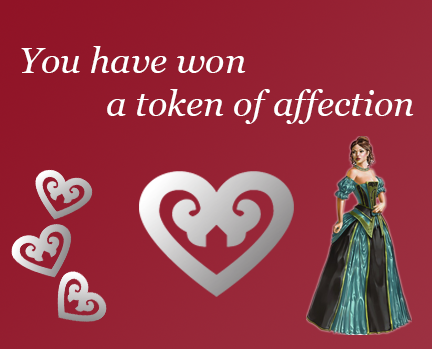
<style>
.page{position:relative;width:432px;height:349px}
.page>*{position:absolute;margin:0}
.t1{font:36px "Georgia-Italic";color:#ffffff}
</style>
<div class="page">
<p class="t1" style="left:21px;top:46px;width:393px;height:78px">You have won <br>          a token of affection</p>
</div>
